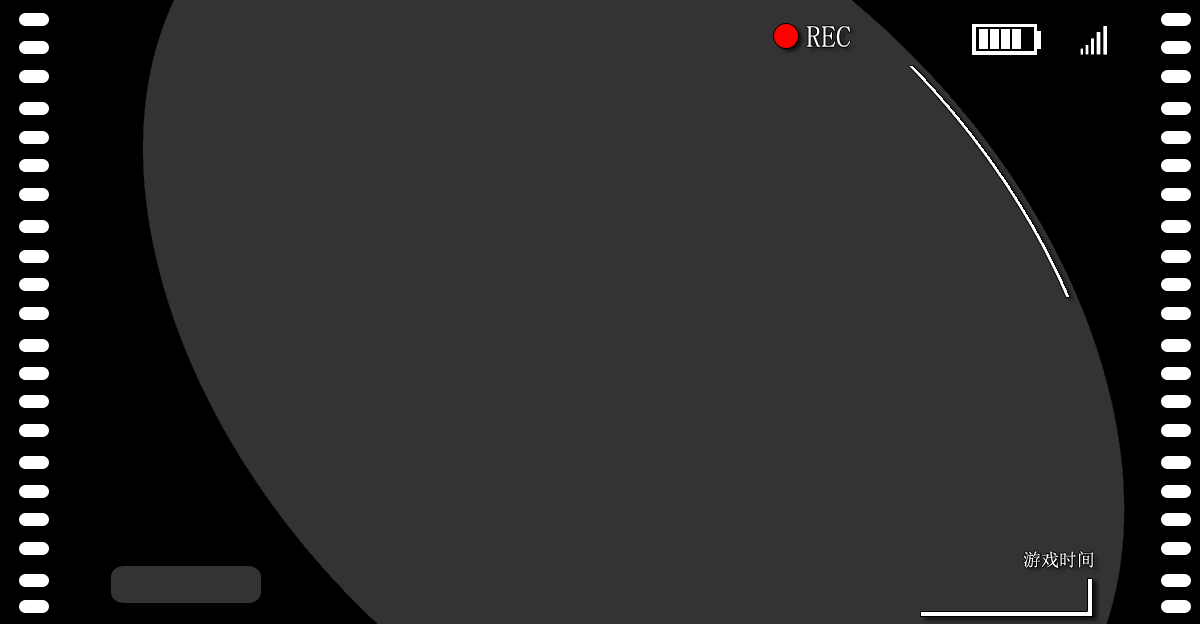
<style>
.page{position:relative;width:1200px;height:624px;background:#333333}
.page>*{position:absolute;margin:0}
.t1{font:30px "SimSun";color:#ffffff}
.t2{font:18px "SimSun";color:#ffffff}
</style>
<div class="page">
<p class="t1" style="left:806px;top:26px;width:44px;height:21px">REC</p>
<p class="t2" style="left:1023px;top:551px;width:71px;height:17px">游戏时间</p>
</div>
